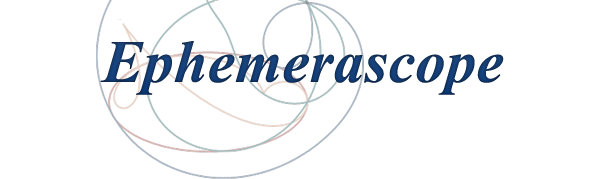
<style>
.page{position:relative;width:600px;height:179px;background:#ffffff}
.page>*{position:absolute;margin:0}
.t1{font:60px "TimesNewRomanPS-BoldItalicMT";letter-spacing:0.01em;color:#0b3977}
</style>
<div class="page">
<p class="t1" style="left:100px;top:41px;width:404px;height:54px">Ephemerascope</p>
</div>
